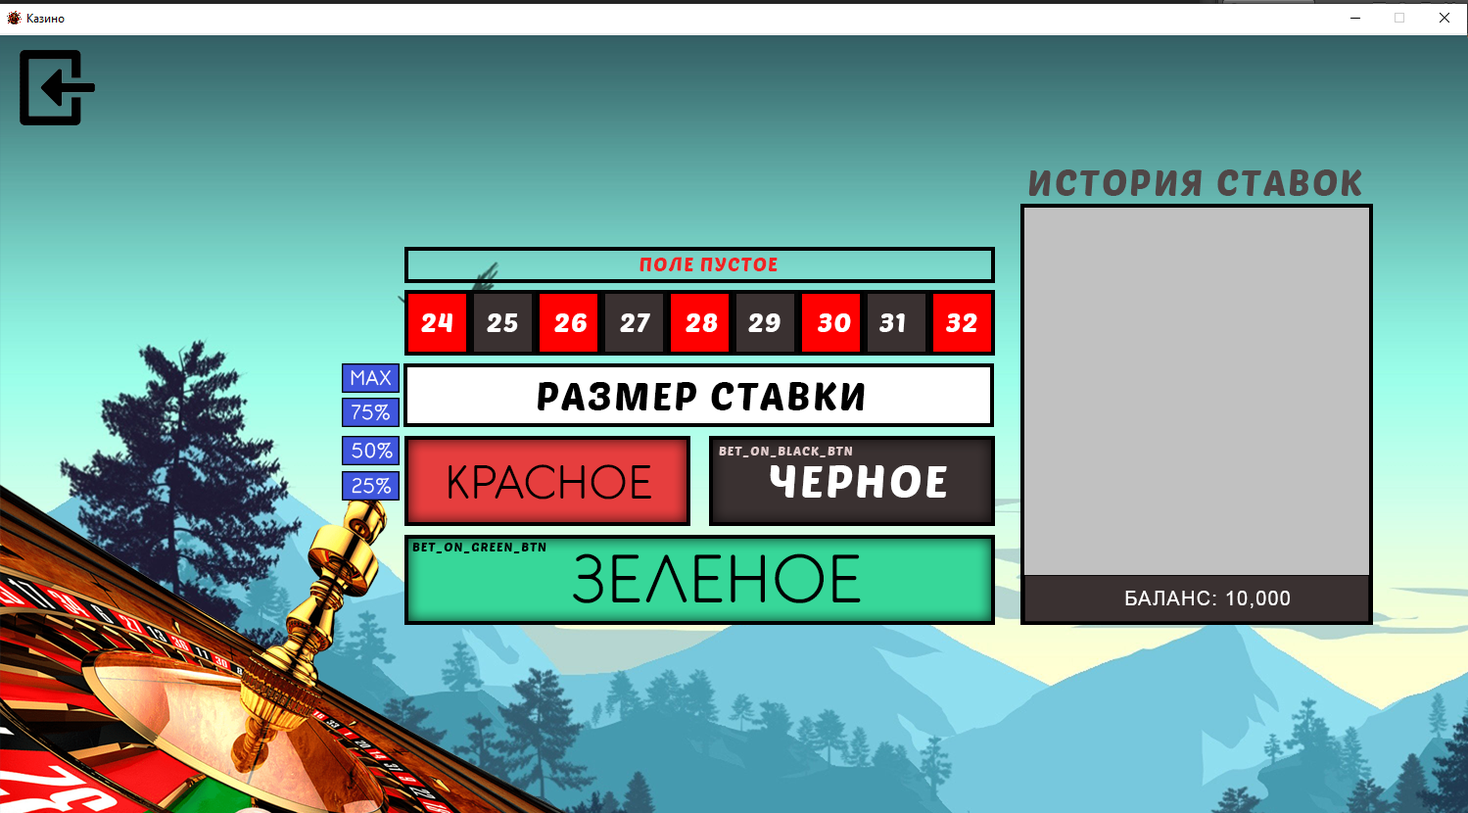
<style>
.page{position:relative;width:1468px;height:813px}
.page>*{position:absolute;margin:0}
.t1{font:36.2px "PoetsenOne-Regular";letter-spacing:0.06em;color:#504747;text-transform:uppercase}
.t2{font:19.6px "PoetsenOne-Regular";letter-spacing:0.06em;color:#f02323;text-transform:uppercase}
.t3{font:26.1px "PoetsenOne-Regular";letter-spacing:0.06em;color:#ffffff;text-transform:uppercase}
.t4{font:26px "PoetsenOne-Regular";letter-spacing:0.06em;color:#ffffff;text-transform:uppercase}
.t5{font:19.7px "CM_GARDEN_R";letter-spacing:0.06em;color:#ffffff;text-transform:uppercase}
.t6{font:39.2px "PoetsenOne-Regular";letter-spacing:0.06em;color:#000000;text-transform:uppercase}
.t7{font:19.6px "CM_GARDEN_R";letter-spacing:0.06em;color:#ffffff;text-transform:uppercase}
.t8{font:13px "PoetsenOne-Regular";letter-spacing:0.06em;color:#e1cccc;text-transform:uppercase}
.t9{font:45.7px "CM_GARDEN_R";letter-spacing:0.06em;color:#000000;text-transform:uppercase}
.t10{font:45.5px "PoetsenOne-Regular";letter-spacing:0.06em;color:#ffffff;text-transform:uppercase}
.t11{font:13px "PoetsenOne-Regular";letter-spacing:0.06em;color:#000000;text-transform:uppercase}
.t12{font:65.3px "CM_GARDEN_R";letter-spacing:0.06em;color:#000000;text-transform:uppercase}
.t13{font:19.6px "ArialMT";letter-spacing:0.06em;color:#ffffff;text-transform:uppercase}
</style>
<div class="page">
<p class="t1" style="left:1028px;top:169px;width:334px;height:27px">история ставок</p>
<p class="t2" style="left:639px;top:256px;width:138px;height:15px">поле пустое</p>
<p class="t3" style="left:421px;top:313px;width:31px;height:19px">24</p>
<p class="t4" style="left:487px;top:313px;width:31px;height:19px">25</p>
<p class="t4" style="left:554px;top:313px;width:32px;height:19px">26</p>
<p class="t4" style="left:620px;top:313px;width:30px;height:19px">27</p>
<p class="t4" style="left:685px;top:313px;width:33px;height:19px">28</p>
<p class="t4" style="left:748px;top:313px;width:32px;height:19px">29</p>
<p class="t4" style="left:817px;top:313px;width:34px;height:19px">30</p>
<p class="t4" style="left:879px;top:313px;width:26px;height:19px">31</p>
<p class="t4" style="left:946px;top:313px;width:31px;height:19px">32</p>
<p class="t5" style="left:350px;top:370px;width:41px;height:16px">MAX</p>
<p class="t6" style="left:537px;top:382px;width:327px;height:28px">РАЗМЕР СТАВКИ</p>
<p class="t7" style="left:351px;top:403px;width:39px;height:18px">75%</p>
<p class="t7" style="left:351px;top:442px;width:42px;height:17px">50%</p>
<p class="t8" style="left:719px;top:446px;width:133px;height:11px">BET_ON_BLACK_BTN</p>
<p class="t9" style="left:448px;top:464px;width:203px;height:35px">красное</p>
<p class="t10" style="left:769px;top:465px;width:178px;height:32px">черное</p>
<p class="t7" style="left:351px;top:477px;width:41px;height:17px">25%</p>
<p class="t11" style="left:412px;top:542px;width:134px;height:11px">BET_ON_GREEN_BTN</p>
<p class="t12" style="left:573px;top:553px;width:288px;height:50px">зеленое</p>
<p class="t13" style="left:1125px;top:590px;width:164px;height:18px">Баланс: 10,000</p>
</div>
